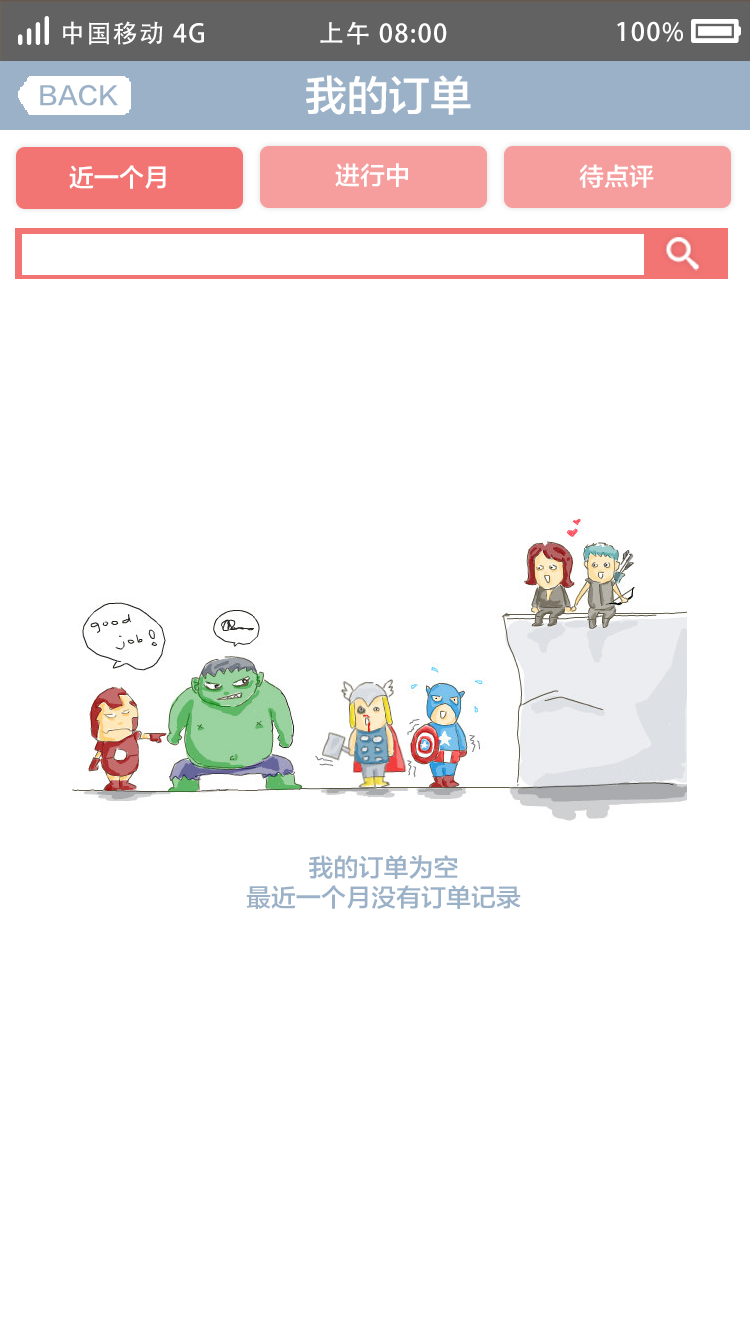
<style>
.page{position:relative;width:750px;height:1334px;background:#ffffff}
.page>*{position:absolute;margin:0}
.t1{font:25px "AdobeHeitiStd-Regular";letter-spacing:0.06em;color:#ffffff}
.t2{font:41.7px "FZLTZHK--GBK1-0";color:#ffffff;text-transform:uppercase}
.t3{font:25px "FZLTZHK--GBK1-0";color:#9bb1c8;text-transform:uppercase}
.t4{font:25px "FZLTZHK--GBK1-0";color:#ffffff;text-transform:uppercase}
</style>
<div class="page">
<p class="t1" style="left:63px;top:21px;width:141px;height:24px">中国移动 4G</p>
<p class="t1" style="left:320px;top:21px;width:127px;height:24px">上午 08:00</p>
<p class="t1" style="left:617px;top:21px;width:66px;height:21px">100%</p>
<p class="t2" style="left:306px;top:75px;width:165px;height:40px">我的订单</p>
<p class="t3" style="left:40px;top:84px;width:78px;height:22px">back</p>
<p class="t4" style="left:69px;top:165px;width:97px;height:24px">近一个月</p>
<p class="t4" style="left:335px;top:163px;width:73px;height:24px">进行中</p>
<p class="t4" style="left:579px;top:164px;width:75px;height:24px">待点评</p>
<p class="t3" style="left:246px;top:855px;width:275px;height:54px;text-align:center">我的订单为空<br>最近一个月没有订单记录</p>
</div>
